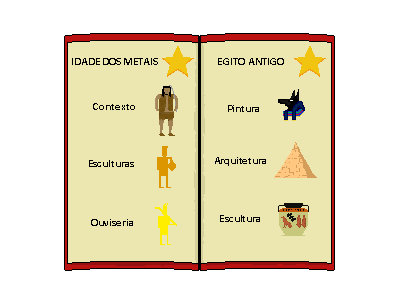
<style>
.page{position:relative;width:400px;height:300px;background:#ffffff}
.page>*{position:absolute;margin:0}
.t1{font:11px "Calibri-Bold";color:#010101}
.t2{font:11px "Calibri-Bold";color:#000000}
</style>
<div class="page">
<p class="t1" style="left:72px;top:58px;width:86px;height:7px">IDADE DOS METAIS</p>
<p class="t1" style="left:218px;top:58px;width:66px;height:7px">EGITO ANTIGO</p>
<p class="t1" style="left:93px;top:103px;width:42px;height:7px">Contexto</p>
<p class="t1" style="left:228px;top:105px;width:31px;height:7px">Pintura</p>
<p class="t1" style="left:89px;top:160px;width:45px;height:7px">Esculturas</p>
<p class="t1" style="left:215px;top:157px;width:51px;height:9px">Arquitetura</p>
<p class="t2" style="left:91px;top:219px;width:42px;height:7px">Ouviseria</p>
</div>
